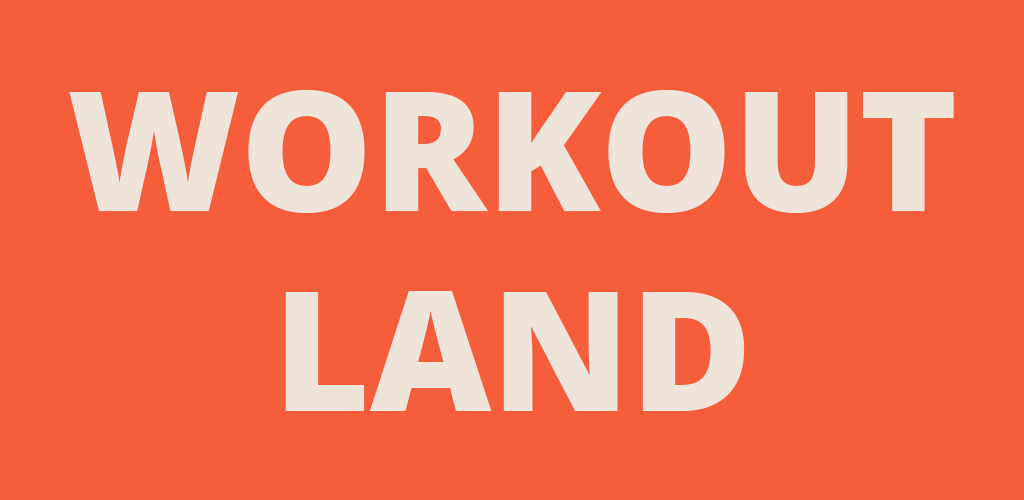
<style>
.page{position:relative;width:1024px;height:500px;background:#f65d3b}
.page>*{position:absolute;margin:0}
.t1{font:166.7px "OpenSans-Extrabold";color:#eee4da}
</style>
<div class="page">
<p class="t1" style="left:69px;top:90px;width:885px;height:321px;text-align:center">WORKOUT<br>LAND</p>
</div>
